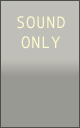
<style>
.page{position:relative;width:80px;height:128px;background:#999993}
.page>*{position:absolute;margin:0}
.t1{font:16.7px "AndaleMono";color:#fffacb}
</style>
<div class="page">
<p class="t1" style="left:17px;top:16px;width:48px;height:33px;text-align:center">SOUND<br>ONLY</p>
</div>
